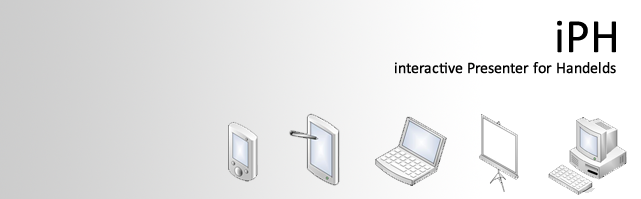
<style>
.page{position:relative;width:641px;height:199px;background:#ffffff}
.page>*{position:absolute;margin:0}
.t1{font:48px "Calibri";color:#000000}
.t2{font:16px "Calibri";color:#000000}
</style>
<div class="page">
<p class="t1" style="left:557px;top:20px;width:59px;height:33px">iPH</p>
<p class="t2" style="left:395px;top:62px;width:221px;height:12px">interactive Presenter for Handelds</p>
</div>
